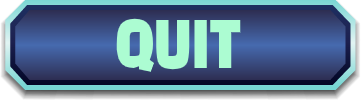
<style>
.page{position:relative;width:361px;height:101px}
.page>*{position:absolute;margin:0}
.t1{font:64px "BlackHanSans-Regular";color:#acfcd2;scale:0.8 1}
</style>
<div class="page">
<p class="t1" style="left:116px;top:18px;width:125px;height:54px">QUIT</p>
</div>
